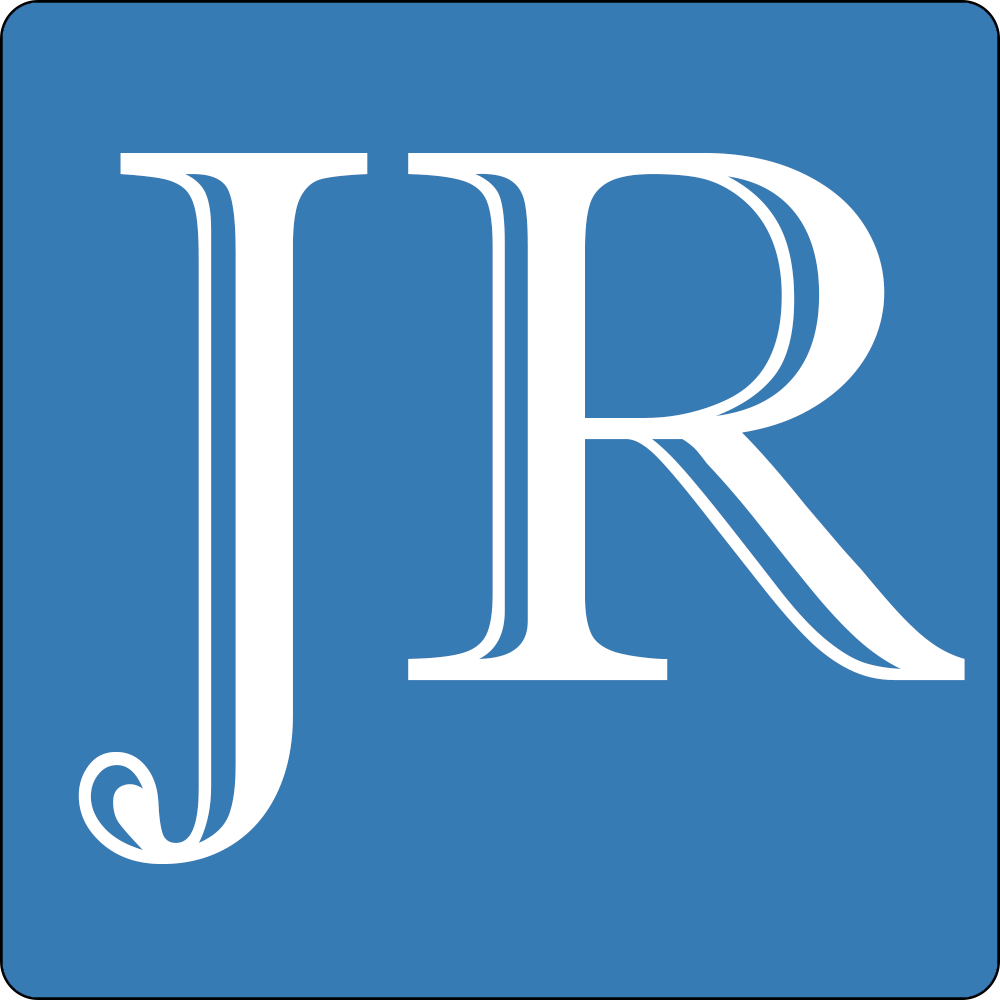
<style>
.page{position:relative;width:1000px;height:1000px;background:#377bb5}
.page>*{position:absolute;margin:0}
.t1{font:765px "ImprintMT-Shadow";color:#ffffff}
</style>
<div class="page">
<p class="t1" style="left:78px;top:153px;width:887px;height:711px">JR</p>
</div>
